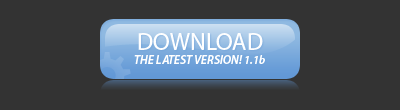
<style>
.page{position:relative;width:400px;height:110px;background:#333333}
.page>*{position:absolute;margin:0}
.t1{font:12px "MyriadPro-SemiboldIt";color:#ffffff;text-transform:uppercase}
.t2{font:24px "MyriadPro-Regular";color:#ffffff;text-transform:uppercase}
.t3{font:12px "MyriadPro-SemiboldIt";color:#ffffff}
</style>
<div class="page">
<p class="t1" style="left:134px;top:33px;width:131px;height:31px;text-align:center"><span class="t2">Download<br></span>The Latest Version! 1.1<span class="t3">b</span></p>
</div>
